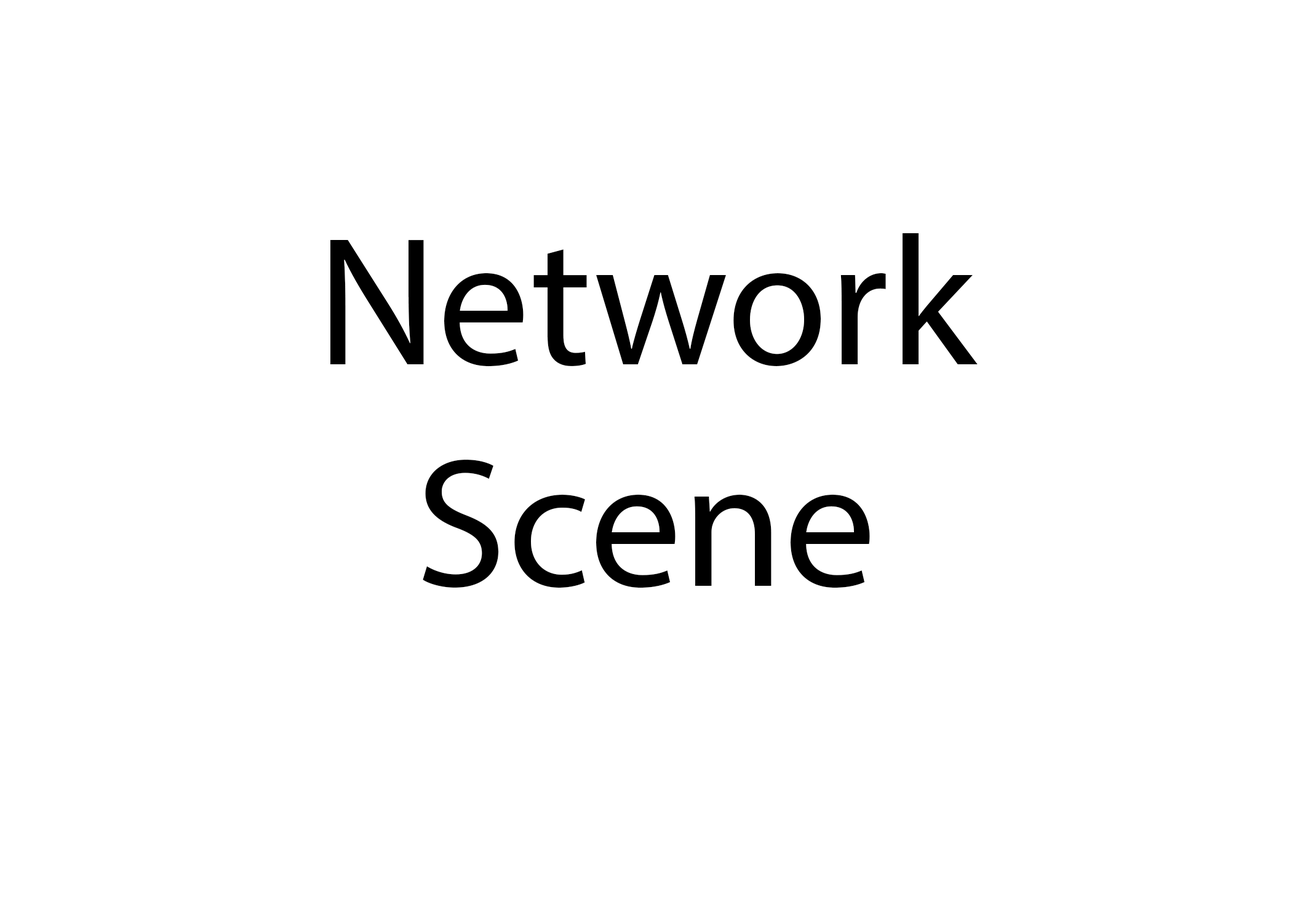
<style>
.page{position:relative;width:1292px;height:923px;background:#ffffff}
.page>*{position:absolute;margin:0}
.t1{font:184.6px "MyriadPro-Regular";color:#000000}
</style>
<div class="page">
<p class="t1" style="left:330px;top:233px;width:648px;height:355px;text-align:center">Network<br>Scene</p>
</div>
